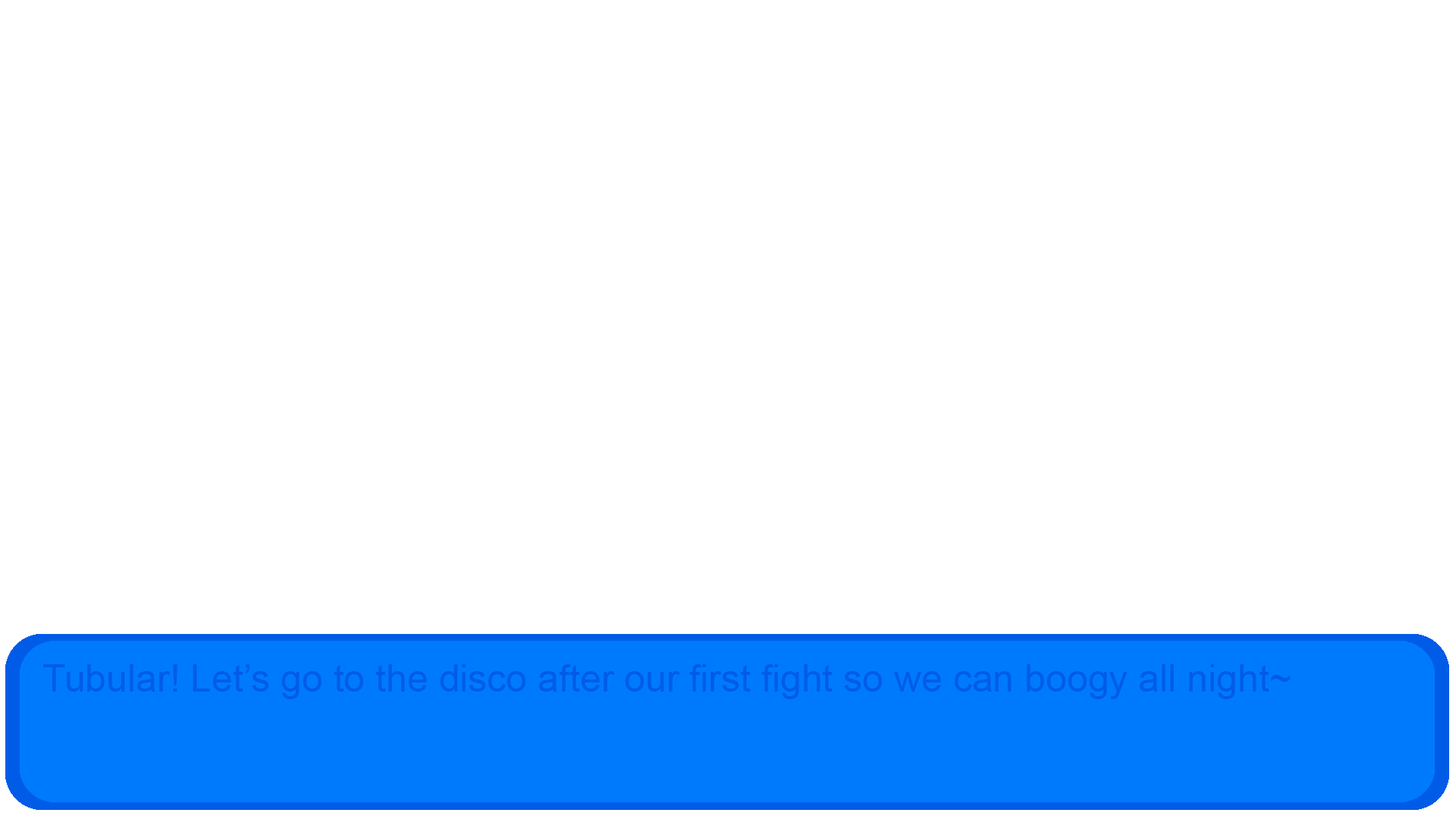
<style>
.page{position:relative;width:1456px;height:819px;background:#ffffff}
.page>*{position:absolute;margin:0}
.t1{font:37.9px "ArialMT";color:#005ce7}
</style>
<div class="page">
<p class="t1" style="left:43px;top:664px;width:1248px;height:35px">Tubular! Let’s go to the disco after our first fight so we can boogy all night~</p>
</div>
